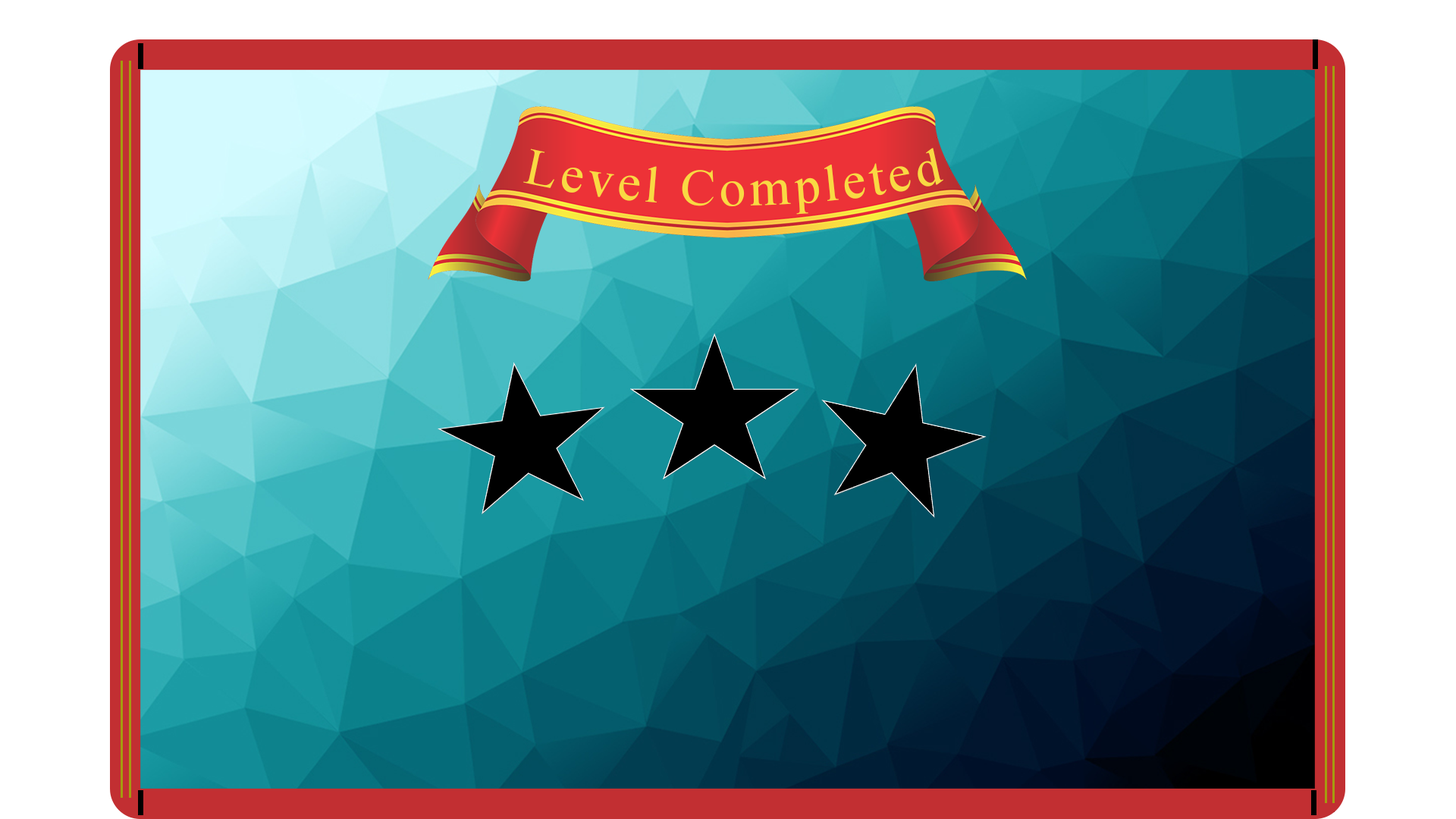
<style>
.page{position:relative;width:1456px;height:819px}
.page>*{position:absolute;margin:0}
.t1{font:50.6px "TimesNewRomanPSMT";letter-spacing:0.075em;color:#f9d943}
</style>
<div class="page">
<p class="t1" style="left:523px;top:148px;width:420px;height:67px">Level Completed</p>
</div>
